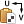
<style>
.page{position:relative;width:24px;height:24px;background:#ffffff}
.page>*{position:absolute;margin:0}
.t1{font:8px "MyriadPro-Semibold";letter-spacing:0.5em;color:#000000}
</style>
<div class="page">
<p class="t1" style="left:5px;top:0px;width:5px;height:7px">U</p>
<p class="t1" style="left:18px;top:14px;width:6px;height:7px">V</p>
</div>
